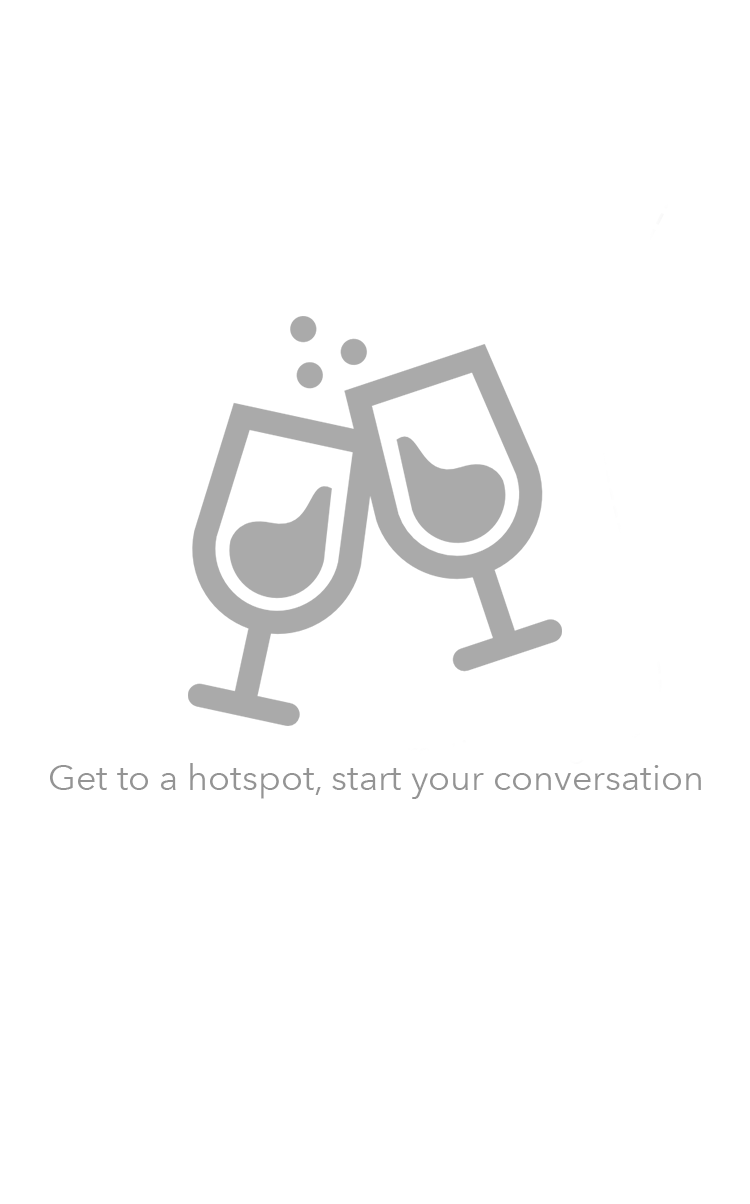
<style>
.page{position:relative;width:750px;height:1204px;background:#ffffff}
.page>*{position:absolute;margin:0}
.t1{font:36px "AvenirNext-Regular";color:#949494}
</style>
<div class="page">
<p class="t1" style="left:50px;top:763px;width:651px;height:36px">Get to a hotspot, start your conversation</p>
</div>
